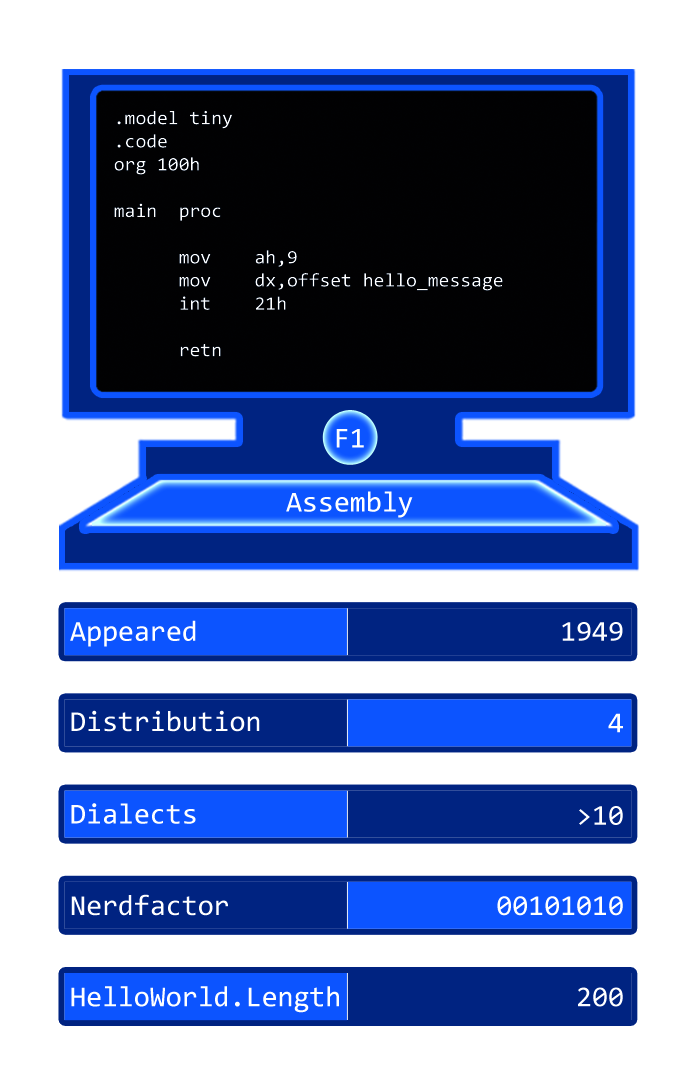
<style>
.page{position:relative;width:697px;height:1087px;background:#ffffff}
.page>*{position:absolute;margin:0}
.t1{font:19.3px "Consolas";color:#ffffff}
.t2{font:29px "Consolas";color:#ffffff}
</style>
<div class="page">
<p class="t1" style="left:114px;top:110px;width:389px;height:247px">.model tiny<br>.code<br>org 100h<br><br>main  proc<br><br>      mov    ah,9<br>      mov    dx,offset hello_message<br>      int    21h<br> <br>      retn</p>
<p class="t2" style="left:336px;top:429px;width:28px;height:19px">F1</p>
<p class="t2" style="left:286px;top:491px;width:127px;height:27px">Assembly</p>
<p class="t2" style="left:70px;top:620px;width:126px;height:27px">Appeared</p>
<p class="t2" style="left:562px;top:622px;width:61px;height:19px">1949</p>
<p class="t2" style="left:71px;top:710px;width:189px;height:22px">Distribution</p>
<p class="t2" style="left:608px;top:713px;width:15px;height:20px">4</p>
<p class="t2" style="left:71px;top:803px;width:125px;height:21px">Dialects</p>
<p class="t2" style="left:579px;top:806px;width:44px;height:19px">&gt;10</p>
<p class="t2" style="left:71px;top:894px;width:157px;height:22px">Nerdfactor</p>
<p class="t2" style="left:497px;top:896px;width:126px;height:20px">00101010</p>
<p class="t2" style="left:71px;top:986px;width:268px;height:27px">HelloWorld.Length</p>
<p class="t2" style="left:578px;top:987px;width:45px;height:20px">200</p>
</div>
